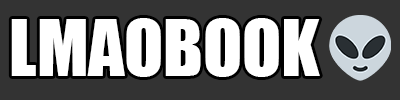
<style>
.page{position:relative;width:400px;height:100px;background:#333333}
.page>*{position:absolute;margin:0}
.t1{font:71.6px "Impact";color:#ffffff}
</style>
<div class="page">
<p class="t1" style="left:11px;top:18px;width:309px;height:59px">LMAOBOOK</p>
</div>
